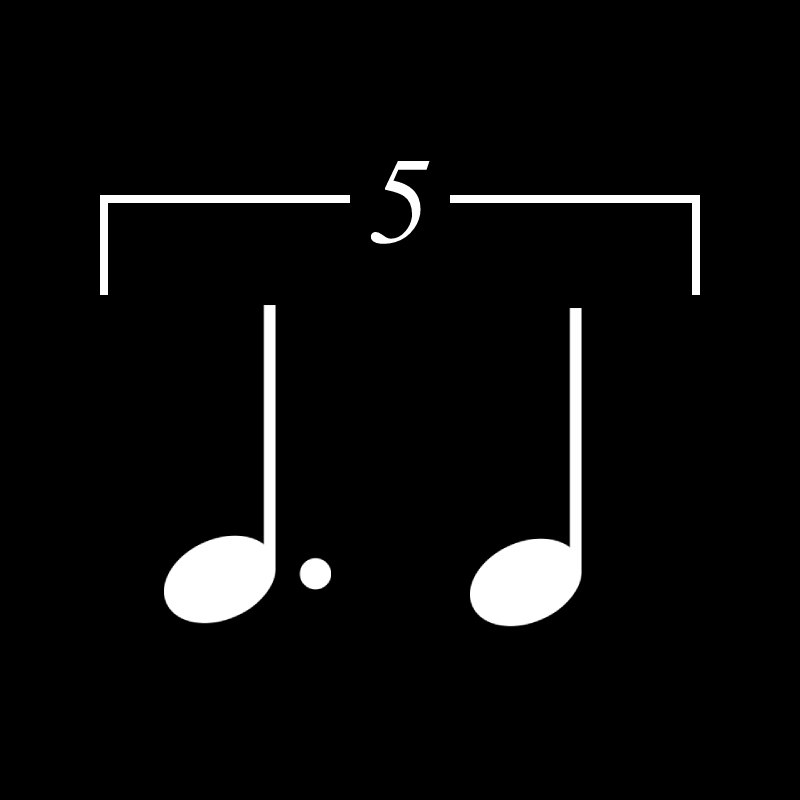
<style>
.page{position:relative;width:800px;height:800px;background:#000000}
.page>*{position:absolute;margin:0}
.t1{font:123px "TemporaLGCUni-Italic";color:#ffffff}
</style>
<div class="page">
<p class="t1" style="left:370px;top:161px;width:60px;height:83px">5</p>
</div>
